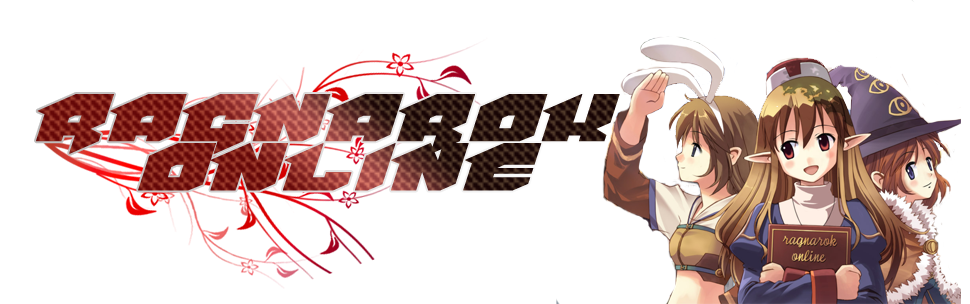
<style>
.page{position:relative;width:970px;height:304px;background:#ffffff}
.page>*{position:absolute;margin:0}
.t1{font:60px/49.1px "VanHelsing";letter-spacing:-0.08em;text-transform:uppercase;font-weight:bold;scale:1.2 1}
</style>
<div class="page">
<p class="t1" style="left:36px;top:94px;width:584px;height:97px;text-align:center">Ragnarok <br>Online</p>
</div>
